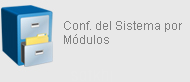
<style>
.page{position:relative;width:190px;height:82px;background:#e8e8e8}
.page>*{position:absolute;margin:0}
.t1{font:12px/14px "ArialMT";color:#808080}
</style>
<div class="page">
<p class="t1" style="left:64px;top:21px;width:118px;height:23px">Conf. del Sistema por Módulos</p>
</div>
